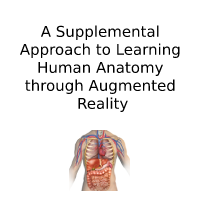
<style>
.page{position:relative;width:200px;height:200px;background:#ffffff}
.page>*{position:absolute;margin:0}
.t1{font:15px "HiraKakuPro-W3";color:#000000}
</style>
<div class="page">
<p class="t1" style="left:19px;top:25px;width:161px;height:87px;text-align:center">A Supplemental <br>Approach to Learning <br>Human Anatomy <br>through Augmented <br>Reality</p>
</div>
